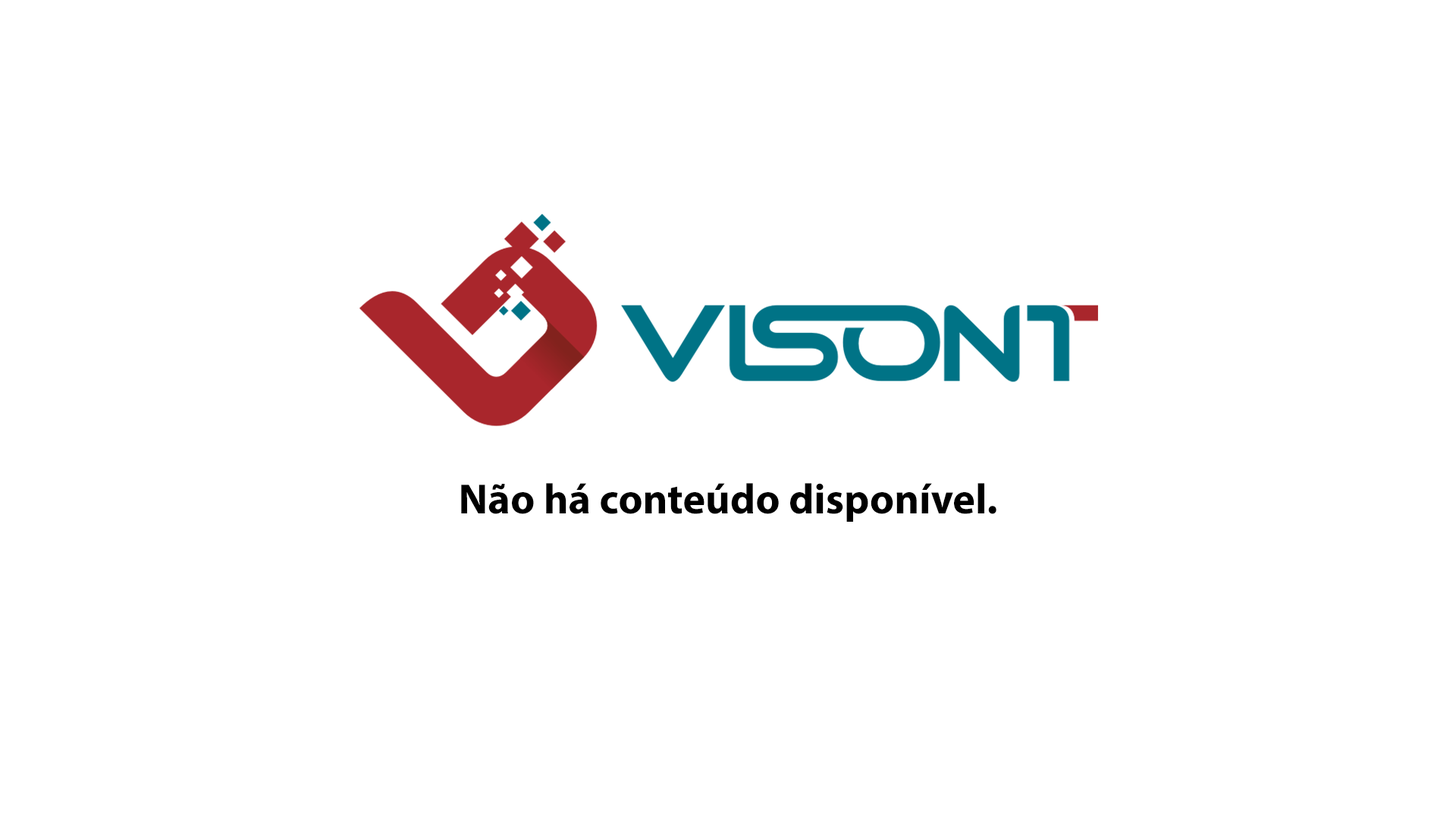
<style>
.page{position:relative;width:1456px;height:819px;background:#ffffff}
.page>*{position:absolute;margin:0}
.t1{font:42.6px "MyriadPro-Bold";color:#000000}
</style>
<div class="page">
<p class="t1" style="left:461px;top:483px;width:535px;height:39px">Não há conteúdo disponível.</p>
</div>
